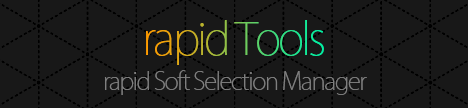
<style>
.page{position:relative;width:468px;height:108px;background:#181818}
.page>*{position:absolute;margin:0}
.t1{font:44.1px "KozGoPr6N-ExtraLight";letter-spacing:-0.06em}
.t2{font:24.1px "KozGoPr6N-ExtraLight";letter-spacing:-0.06em;color:#7f7f7f}
</style>
<div class="page">
<p class="t1" style="left:146px;top:20px;width:178px;height:45px">rapid Tools</p>
<p class="t2" style="left:104px;top:70px;width:263px;height:25px">rapid Soft Selection Manager</p>
</div>
